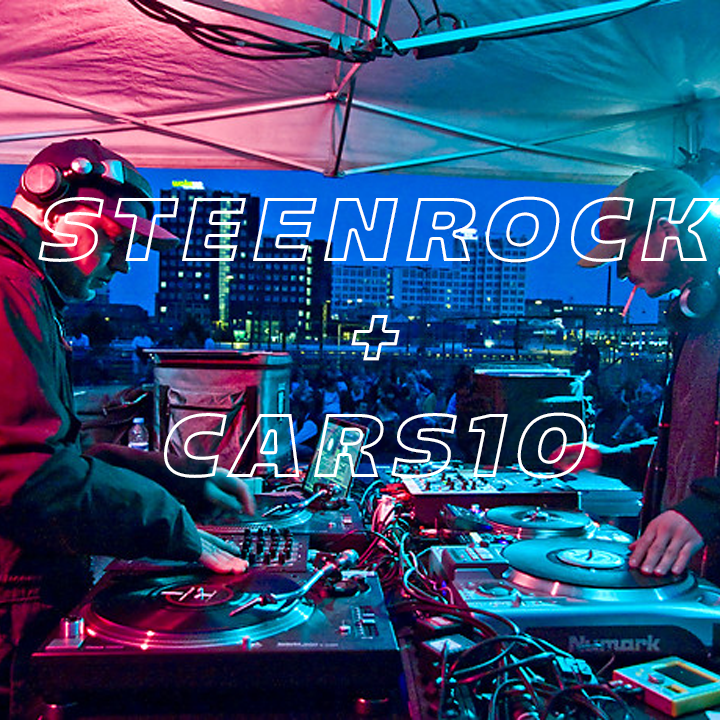
<style>
.page{position:relative;width:720px;height:720px}
.page>*{position:absolute;margin:0}
.t1{font:90px "Majoris-Italic";letter-spacing:0.1em;text-transform:uppercase}
</style>
<div class="page">
<p class="t1" style="left:38px;top:196px;width:682px;height:283px;text-align:center">steenrock<br>+<br>cars10</p>
</div>
